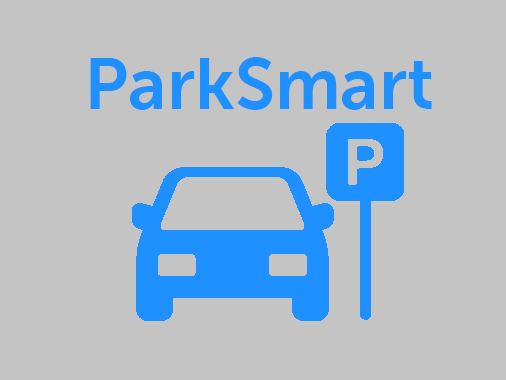
<style>
.page{position:relative;width:506px;height:380px;background:#c4c4c4}
.page>*{position:absolute;margin:0}
.t1{font:72px "MuseoSansForDell-Bold";color:#1e90ff}
</style>
<div class="page">
<p class="t1" style="left:90px;top:57px;width:342px;height:53px">ParkSmart</p>
</div>
